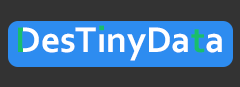
<style>
.page{position:relative;width:240px;height:87px;background:#333333}
.page>*{position:absolute;margin:0}
.t1{font:37.5px "Corbel-Bold";color:#ffffff}
</style>
<div class="page">
<p class="t1" style="left:18px;top:25px;width:204px;height:36px">DesTinyData</p>
</div>
